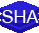
<style>
.page{position:relative;width:39px;height:33px;background:#2a20d8}
.page>*{position:absolute;margin:0}
.t1{font:18px "HelveticaNeue";color:#ffffff}
</style>
<div class="page">
<p class="t1" style="left:2px;top:10px;width:37px;height:13px">SHA</p>
</div>
